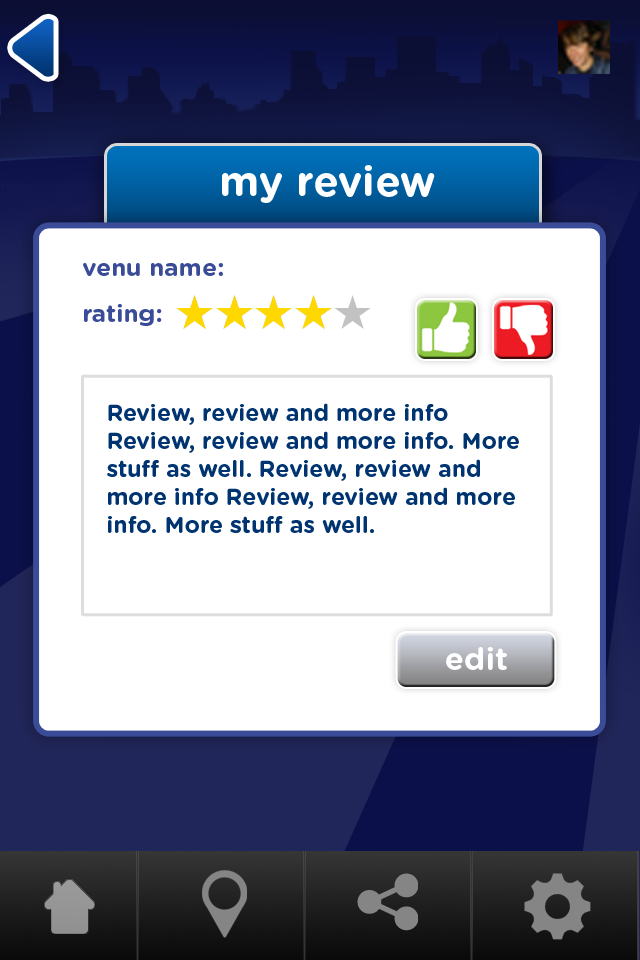
<style>
.page{position:relative;width:640px;height:960px;background:#ffffff}
.page>*{position:absolute;margin:0}
.t1{font:42px "GothamRounded-Bold";color:#ffffff}
.t2{font:24.5px/46px "GothamRounded-Bold";color:#3a4c98}
.t3{font:23px/28px "GothamRounded-Bold";color:#003471}
.t4{font:31.5px "GothamRounded-Bold";color:#ffffff}
</style>
<div class="page">
<p class="t1" style="left:222px;top:165px;width:213px;height:38px">my review</p>
<p class="t2" style="left:83px;top:263px;width:140px;height:63px">venu name:<br>rating:</p>
<p class="t3" style="left:107px;top:403px;width:412px;height:130px">Review, review and more info <br>Review, review and more info. More<br>stuff as well. Review, review and <br>more info Review, review and more <br>info. More stuff as well.</p>
<p class="t4" style="left:446px;top:647px;width:61px;height:23px">edit</p>
</div>
